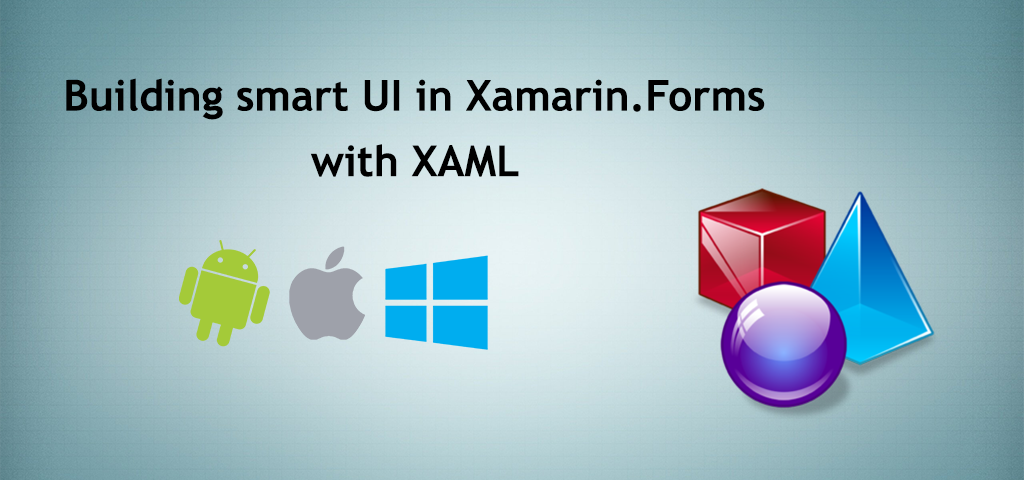
<style>
.page{position:relative;width:1024px;height:480px}
.page>*{position:absolute;margin:0}
.t1{font:42.6px/65.6px "TrebuchetMS-Bold";color:#000000}
</style>
<div class="page">
<p class="t1" style="left:66px;top:78px;width:699px;height:99px;text-align:center">Building smart UI in Xamarin.Forms<br>with XAML</p>
</div>
